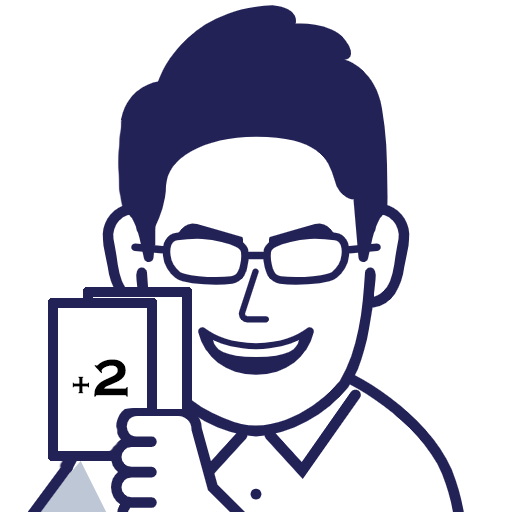
<style>
.page{position:relative;width:512px;height:512px;background:#ffffff}
.page>*{position:absolute;margin:0}
.t1{font:30px "CopperplateGothic-Bold";color:#000000}
.t2{font:52.2px "CopperplateGothic-Bold";color:#000000}
</style>
<div class="page">
<p class="t1" style="left:72px;top:359px;width:56px;height:38px">+<span class="t2">2</span></p>
</div>
